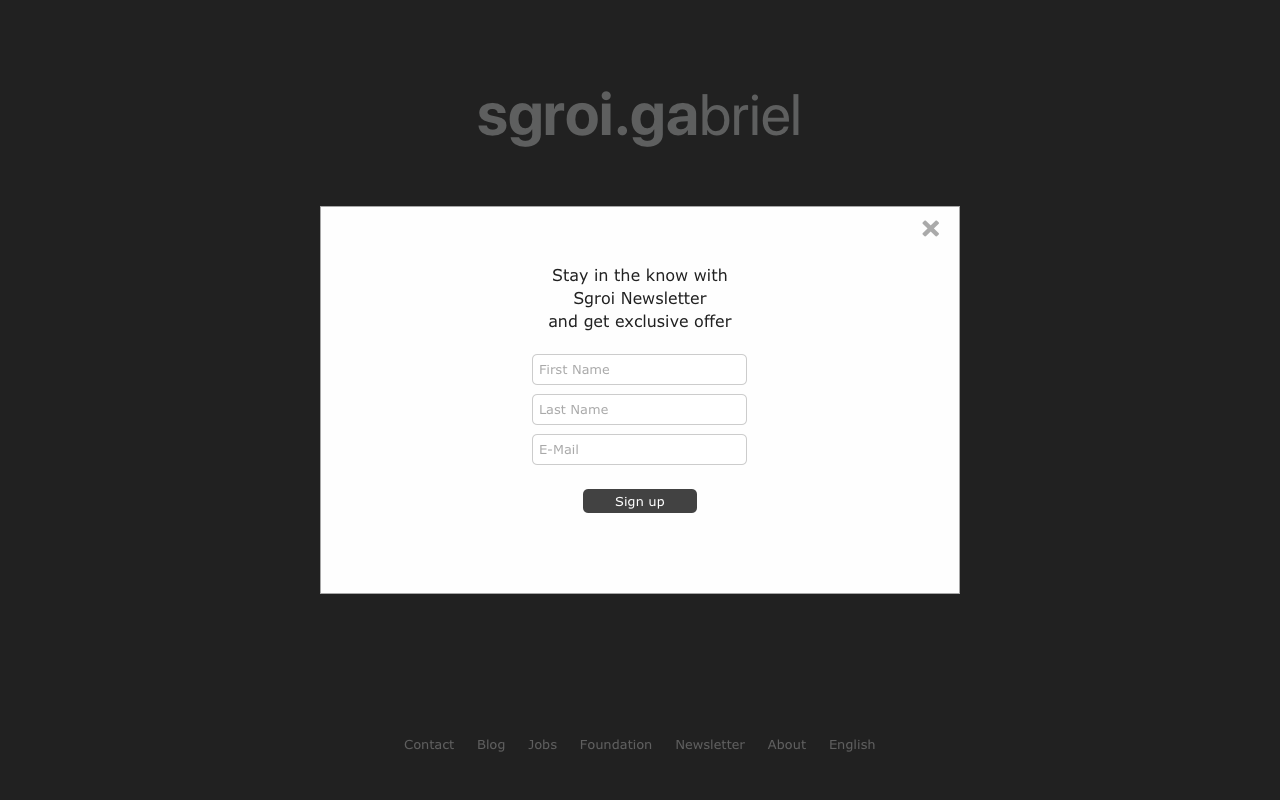
<style>
.page{position:relative;width:1280px;height:800px;background:#212121}
.page>*{position:absolute;margin:0}
.t1{font:60px "SFProDisplay-Bold";color:#5e5f5f}
.t2{font:58px "SFProDisplay-Regular";color:#5e5f5f}
.t3{font:16px/22.5px "Verdana";color:#212121}
.t4{font:13px "Verdana";color:#a9a9a9}
.t5{font:13px "Verdana";color:#ffffff}
.t6{font:13px "Verdana";color:#5f5f5f}
</style>
<div class="page">
<p class="t1" style="left:478px;top:91px;width:321px;height:56px">sgroi.ga<span class="t2">briel</span></p>
<p class="t3" style="left:549px;top:268px;width:183px;height:63px;text-align:center">Stay in the know with<br>Sgroi Newsletter<br>and get exclusive offer</p>
<p class="t4" style="left:540px;top:364px;width:70px;height:11px">First Name</p>
<p class="t4" style="left:540px;top:405px;width:68px;height:10px">Last Name</p>
<p class="t4" style="left:540px;top:444px;width:38px;height:11px">E-Mail</p>
<p class="t5" style="left:615px;top:496px;width:50px;height:13px">Sign up</p>
<p class="t6" style="left:404px;top:739px;width:471px;height:13px">Contact     Blog     Jobs     Foundation     Newsletter     About     English</p>
</div>
